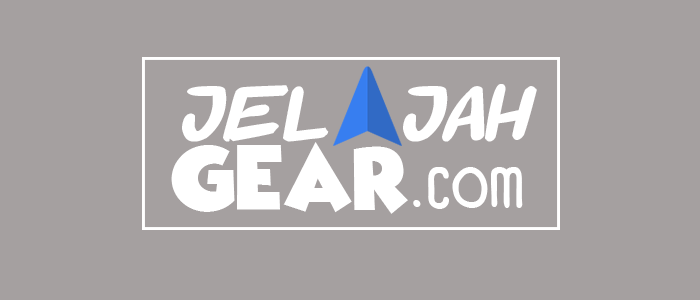
<style>
.page{position:relative;width:700px;height:300px;background:#a5a0a0}
.page>*{position:absolute;margin:0}
.t1{font:75px "Roofrunners-Bold";color:#ffffff;scale:1.26 1}
.t2{font:75px "WickedMouse";color:#ffffff}
.t3{font:75px "Panforte-CondensedRegular";color:#ffffff}
</style>
<div class="page">
<p class="t1" style="left:182px;top:84px;width:355px;height:58px">jel   jah</p>
<p class="t2" style="left:171px;top:142px;width:237px;height:72px">gear</p>
<p class="t3" style="left:413px;top:167px;width:110px;height:42px">.com</p>
</div>
